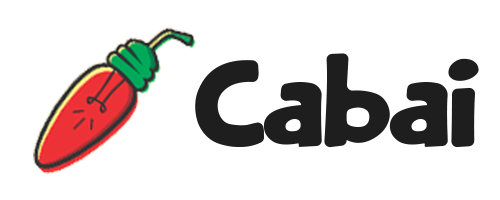
<style>
.page{position:relative;width:500px;height:200px;background:#ffffff}
.page>*{position:absolute;margin:0}
.t1{font:145.2px "UnderlordRegular";color:#1e1e1e}
</style>
<div class="page">
<p class="t1" style="left:195px;top:53px;width:284px;height:95px">Cabai</p>
</div>
